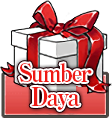
<style>
.page{position:relative;width:112px;height:118px;background:#ffffff}
.page>*{position:absolute;margin:0}
.t1{font:25px/47px "RyuminPro-ExBold";letter-spacing:-0.08em;color:#ee1814;scale:0.9 1}
</style>
<div class="page">
<p class="t1" style="left:19px;top:63px;width:73px;height:47px;text-align:center">Sumber<br>Daya</p>
</div>
